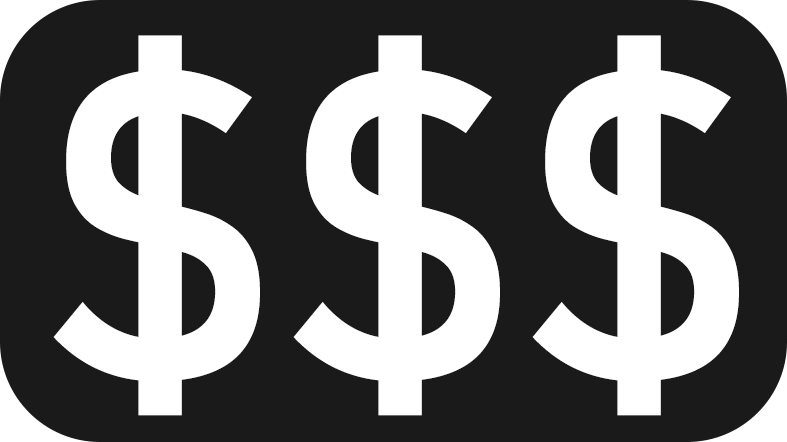
<style>
.page{position:relative;width:787px;height:442px;background:#1a1a1a}
.page>*{position:absolute;margin:0}
.t1{font:429.9px "Bahnschrift";color:#ffffff}
</style>
<div class="page">
<p class="t1" style="left:53px;top:35px;width:686px;height:381px">$$$</p>
</div>
